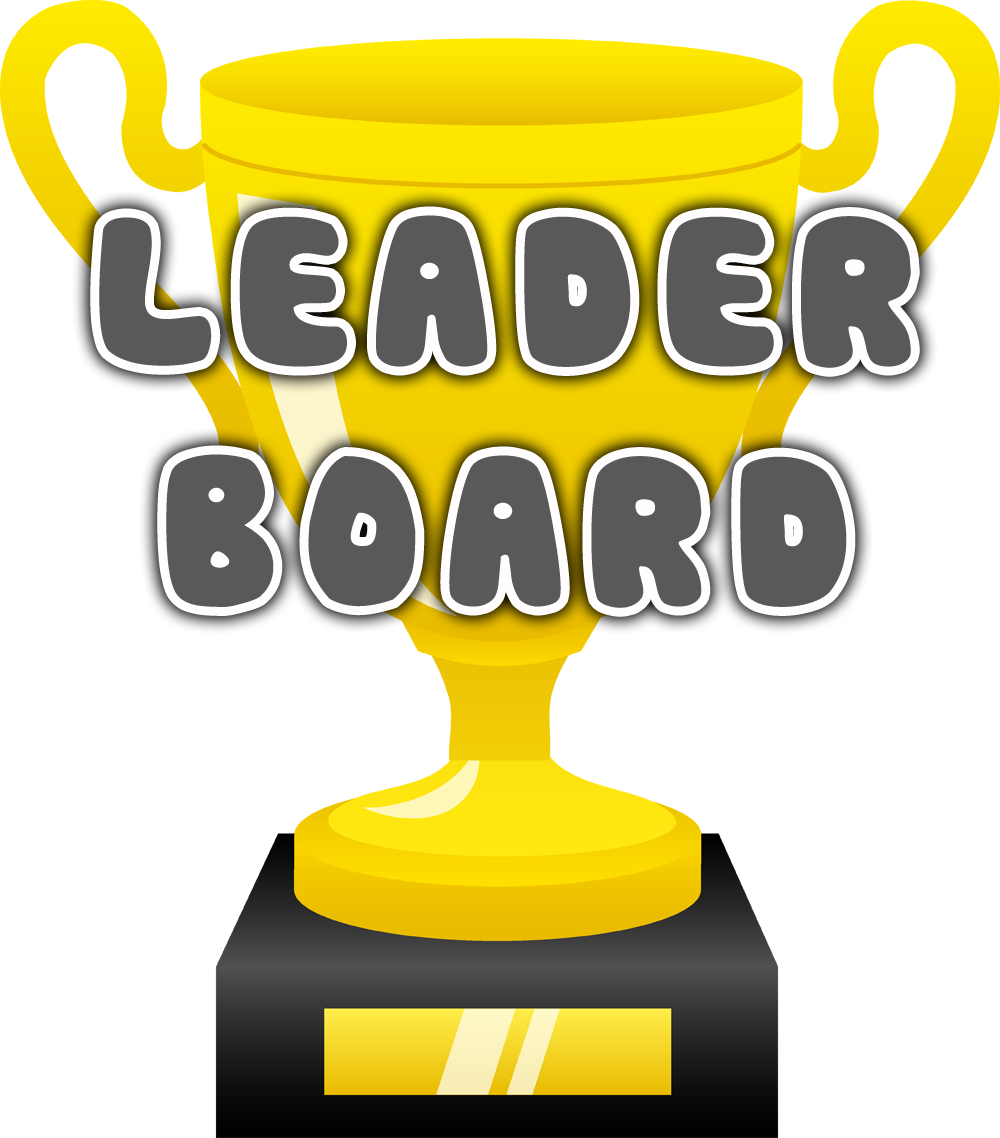
<style>
.page{position:relative;width:1000px;height:1138px;background:#ffffff}
.page>*{position:absolute;margin:0}
.t1{font:200px "Cookies";letter-spacing:0.1em;color:#5a5959;font-weight:bold}
</style>
<div class="page">
<p class="t1" style="left:99px;top:215px;width:812px;height:393px;text-align:center">LEADER BOARD</p>
</div>
